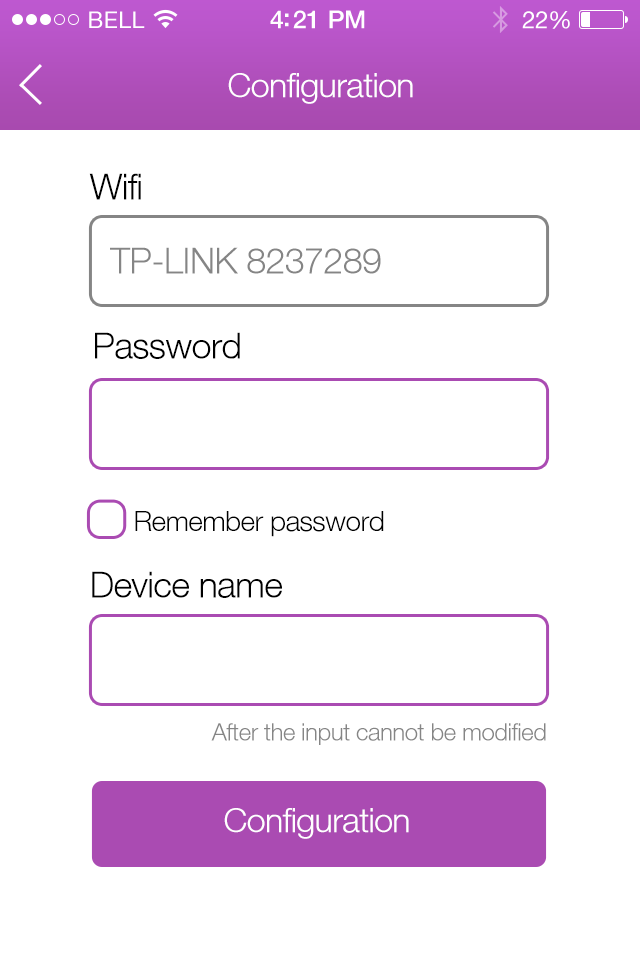
<style>
.page{position:relative;width:640px;height:960px;background:#ffffff}
.page>*{position:absolute;margin:0}
.t1{font:34px "HelveticaNeueLT-Light";letter-spacing:-0.02em;color:#ffffff}
.t2{font:36px "HelveticaNeueLT-Light";letter-spacing:-0.02em;color:#000000}
.t3{font:36px "HelveticaNeueLT-Light";letter-spacing:-0.02em;color:#858585}
.t4{font:28px "HelveticaNeueLT-Light";letter-spacing:-0.02em;color:#000000}
.t5{font:24px "HelveticaNeueLT-Light";letter-spacing:-0.02em;color:#858585}
</style>
<div class="page">
<p class="t1" style="left:228px;top:73px;width:185px;height:31px">Configuration</p>
<p class="t2" style="left:89px;top:173px;width:52px;height:27px">Wifi</p>
<p class="t3" style="left:110px;top:247px;width:271px;height:27px">TP-LINK 8237289</p>
<p class="t2" style="left:95px;top:332px;width:145px;height:27px">Password</p>
<p class="t4" style="left:135px;top:511px;width:249px;height:26px">Remember password</p>
<p class="t2" style="left:92px;top:571px;width:190px;height:27px">Device name</p>
<p class="t5" style="left:211px;top:723px;width:335px;height:22px">After the input cannot be modified</p>
<p class="t1" style="left:224px;top:808px;width:185px;height:31px">Configuration</p>
</div>
